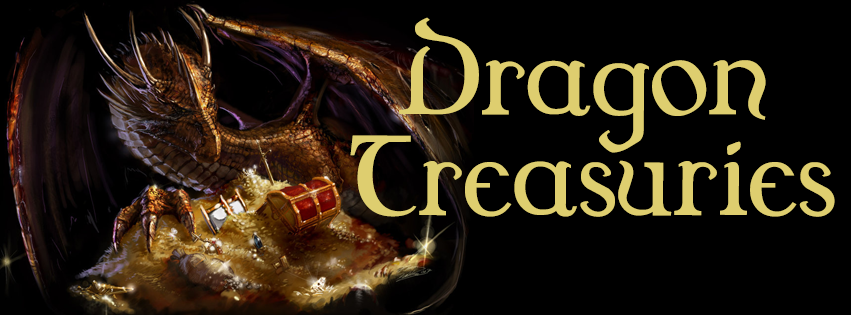
<style>
.page{position:relative;width:851px;height:315px;background:#000000}
.page>*{position:absolute;margin:0}
.t1{font:168.6px/100.6px "Dungeon";color:#dece6f}
</style>
<div class="page">
<p class="t1" style="left:350px;top:17px;width:485px;height:200px;text-align:center">Dragon <br>Treasuries</p>
</div>
